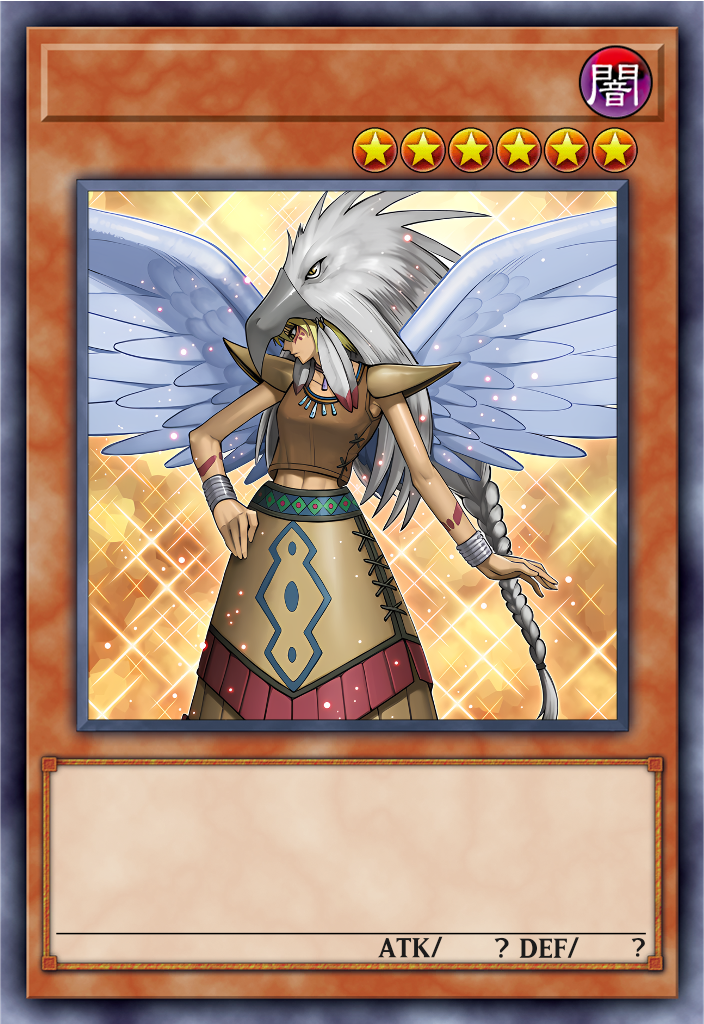
<style>
.page{position:relative;width:704px;height:1024px}
.page>*{position:absolute;margin:0}
.t1{font:32.6px "MatrixBoldSmallCaps-Regular";color:#1b1b1b}
.t2{font:32.6px "MatrixBoldSmallCaps-Regular";letter-spacing:0.027em;color:#1b1b1b}
.t3{font:32.6px "MatrixBoldSmallCaps-Regular";letter-spacing:0.012em;color:#1b1b1b}
.t4{font:51.7px "MatrixRegularSmallCaps";color:#1b1b1b}
.t5{font:48.6px "MatrixRegularSmallCaps";color:#1b1b1b}
</style>
<div class="page">
<p class="t1" style="left:376px;top:936px;width:68px;height:23px">AT<span class="t2">K</span><span class="t3">/</span></p>
<p class="t4" style="left:493px;top:937px;width:17px;height:22px">?</p>
<p class="t1" style="left:518px;top:937px;width:62px;height:22px">DEF/</p>
<p class="t5" style="left:630px;top:938px;width:16px;height:20px">?</p>
</div>
